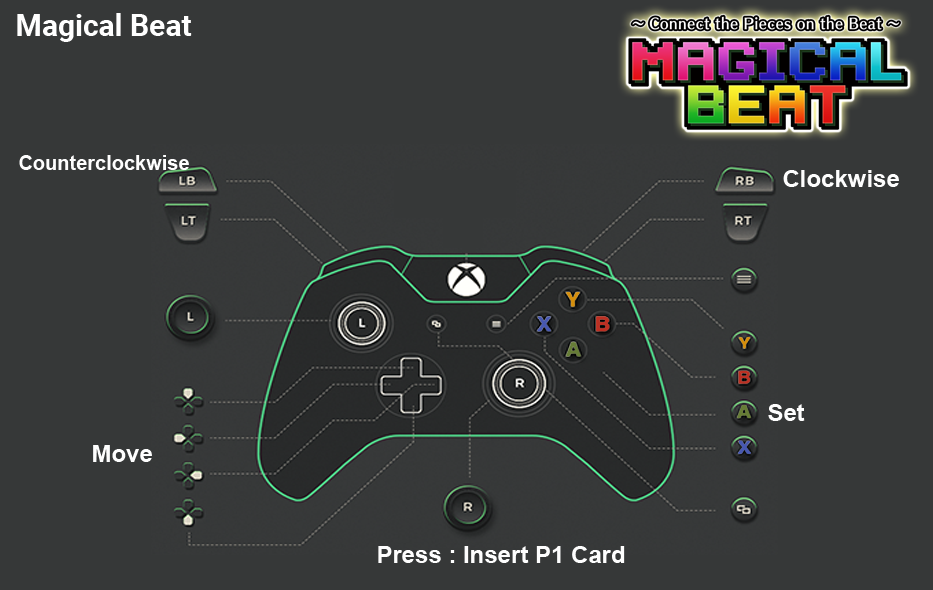
<style>
.page{position:relative;width:933px;height:590px;background:#363838}
.page>*{position:absolute;margin:0}
.t1{font:30px "Roboto-Bold";color:#ffffff}
.t2{font:20px "Arial-BoldMT";color:#fefefe}
.t3{font:24px "Arial-BoldMT";color:#fefefe}
</style>
<div class="page">
<p class="t1" style="left:17px;top:13px;width:175px;height:29px">Magical Beat</p>
<p class="t2" style="left:19px;top:155px;width:170px;height:15px">Counterclockwise</p>
<p class="t3" style="left:783px;top:170px;width:116px;height:17px">Clockwise</p>
<p class="t3" style="left:768px;top:404px;width:37px;height:17px">Set</p>
<p class="t3" style="left:93px;top:445px;width:59px;height:17px">Move</p>
<p class="t3" style="left:378px;top:546px;width:247px;height:17px">Press : Insert P1 Card</p>
</div>
